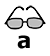
<style>
.page{position:relative;width:50px;height:56px;background:#ffffff}
.page>*{position:absolute;margin:0}
.t1{font:21.9px "Verdana-Bold";letter-spacing:-0.05em;color:#000000}
</style>
<div class="page">
<p class="t1" style="left:17px;top:35px;width:13px;height:14px">a</p>
</div>
